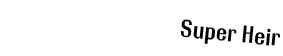
<style>
.page{position:relative;width:283px;height:56px;background:#ffffff}
.page>*{position:absolute;margin:0}
.t1{font:24px "RolloutPlain";color:#000000}
</style>
<div class="page">
<p class="t1" style="left:181px;top:19px;width:99px;height:27px;rotate:6deg">Super Heir</p>
</div>
